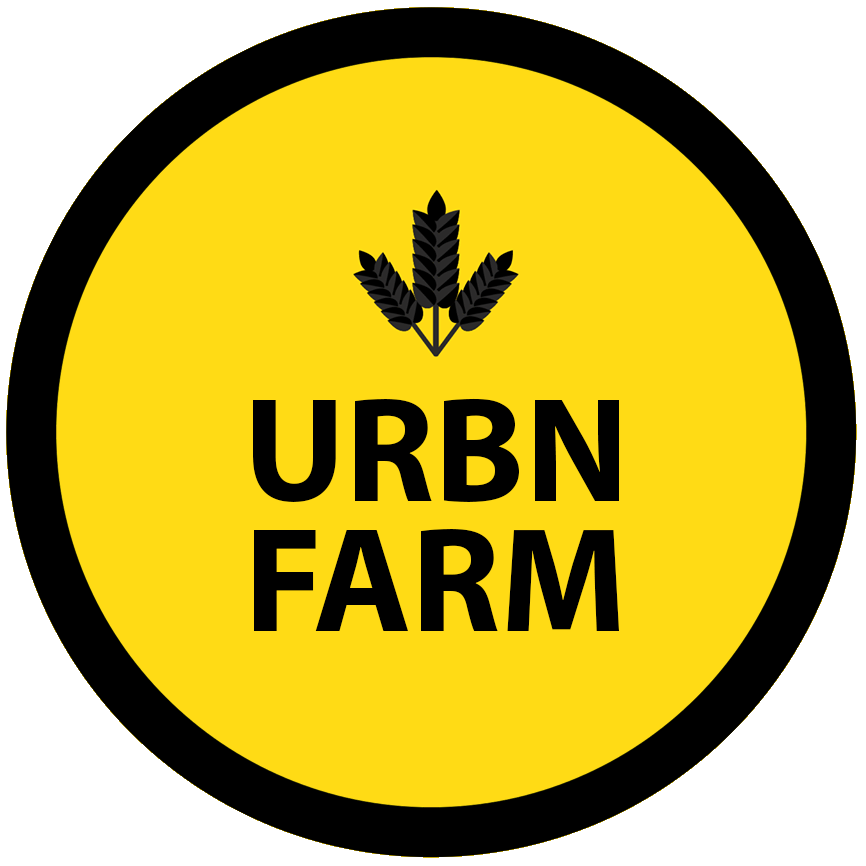
<style>
.page{position:relative;width:866px;height:866px;background:#ffdb15}
.page>*{position:absolute;margin:0}
.t1{font:150px/130px "MyriadPro-Bold";color:#000000}
</style>
<div class="page">
<p class="t1" style="left:253px;top:398px;width:366px;height:233px;text-align:center">URBN<br>FARM</p>
</div>
